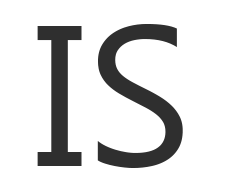
<style>
.page{position:relative;width:242px;height:192px;background:#ffffff}
.page>*{position:absolute;margin:0}
.t1{font:200px "MyanmarText";color:#2f2f2f}
</style>
<div class="page">
<p class="t1" style="left:37px;top:24px;width:146px;height:144px">IS</p>
</div>
